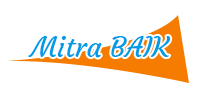
<style>
.page{position:relative;width:200px;height:100px;background:#ffffff}
.page>*{position:absolute;margin:0}
.t1{font:28px "Courgette-Regular";color:#039be5}
</style>
<div class="page">
<p class="t1" style="left:28px;top:36px;width:143px;height:22px">Mitra BAIK</p>
</div>
